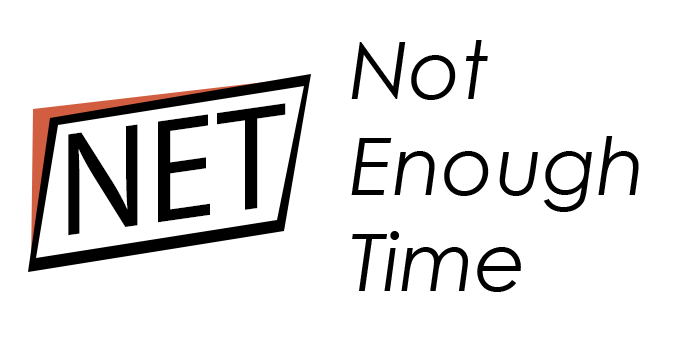
<style>
.page{position:relative;width:700px;height:345px;background:#ffffff}
.page>*{position:absolute;margin:0}
.t1{font:80px "CenturyGothic-Italic";color:#000000}
</style>
<div class="page">
<p class="t1" style="left:351px;top:40px;width:288px;height:252px">Not<br>Enough<br>Time</p>
</div>
